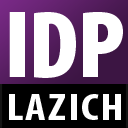
<style>
.page{position:relative;width:128px;height:128px;background:#ffffff}
.page>*{position:absolute;margin:0}
.t1{font:95.8px "MyriadPro-BlackCond";letter-spacing:-0.02em;color:#ffffff}
.t2{font:37.3px "MyriadPro-BoldCond";letter-spacing:0.04em;color:#ffffff;scale:1.22 1}
</style>
<div class="page">
<p class="t1" style="left:9px;top:12px;width:114px;height:66px">IDP</p>
<p class="t2" style="left:9px;top:94px;width:112px;height:26px">LAZICH</p>
</div>
